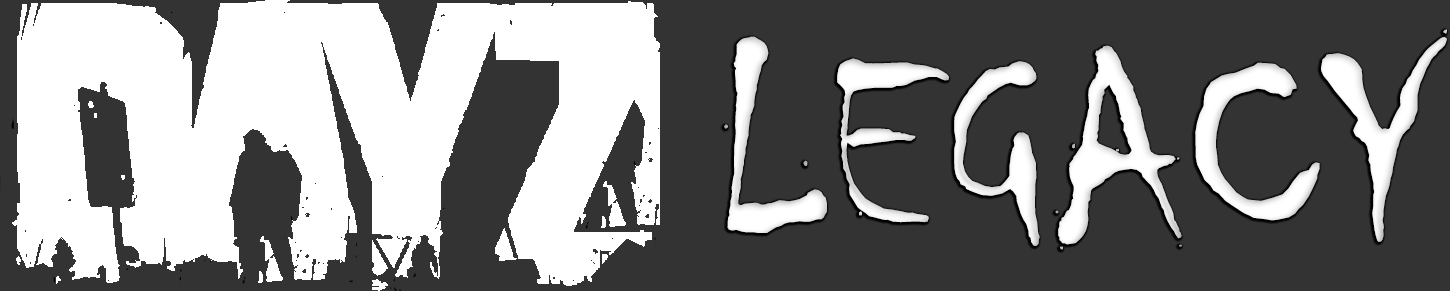
<style>
.page{position:relative;width:1450px;height:291px;background:#333333}
.page>*{position:absolute;margin:0}
.t1{font:271.6px "Chiller-Regular";color:#ffffff}
</style>
<div class="page">
<p class="t1" style="left:724px;top:29px;width:723px;height:221px">LEGACY</p>
</div>
